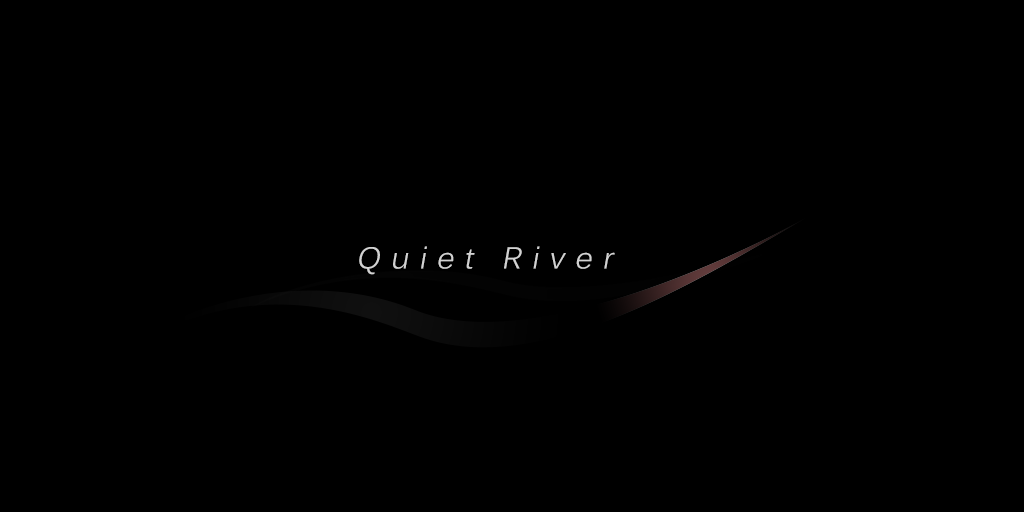
<style>
.page{position:relative;width:1024px;height:512px;background:#000000}
.page>*{position:absolute;margin:0}
.t1{font:30px "Kalinga";letter-spacing:0.34em;color:#d2d2d2;font-style:italic}
</style>
<div class="page">
<p class="t1" style="left:359px;top:246px;width:256px;height:29px">Quiet River</p>
</div>
